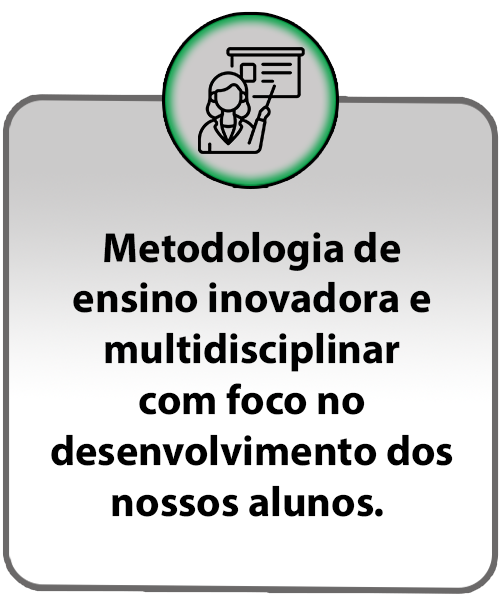
<style>
.page{position:relative;width:500px;height:600px;background:#ffffff}
.page>*{position:absolute;margin:0}
.t1{font:42.3px "MyriadConceptRoman-Bold";color:#000000}
</style>
<div class="page">
<p class="t1" style="left:51px;top:231px;width:402px;height:286px;text-align:center">Metodologia de<br>ensino inovadora e<br>multidisciplinar<br>com foco no<br>desenvolvimento dos<br>nossos alunos.</p>
</div>
